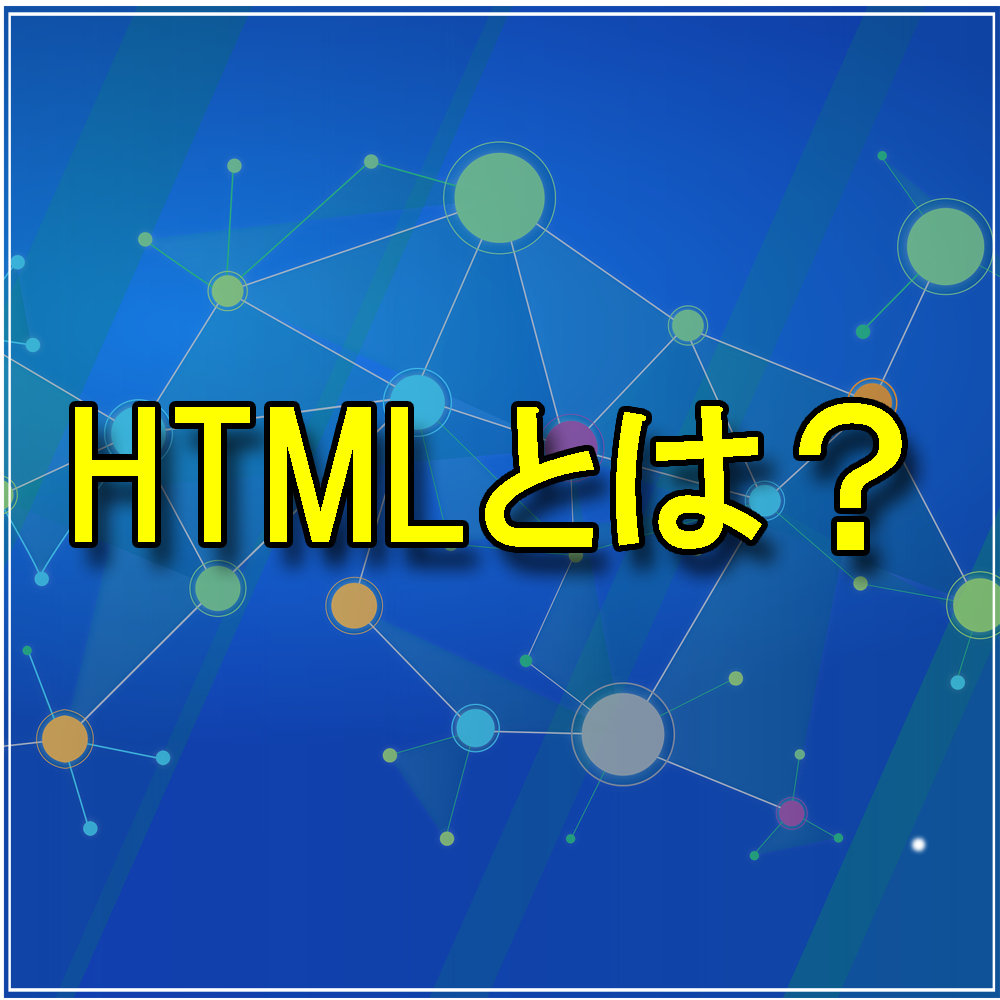
<style>
.page{position:relative;width:1000px;height:1000px}
.page>*{position:absolute;margin:0}
.t1{font:168.5px "HGPGothicE";color:#ffff00}
</style>
<div class="page">
<p class="t1" style="left:75px;top:403px;width:827px;height:147px">HTMLとは？</p>
</div>
